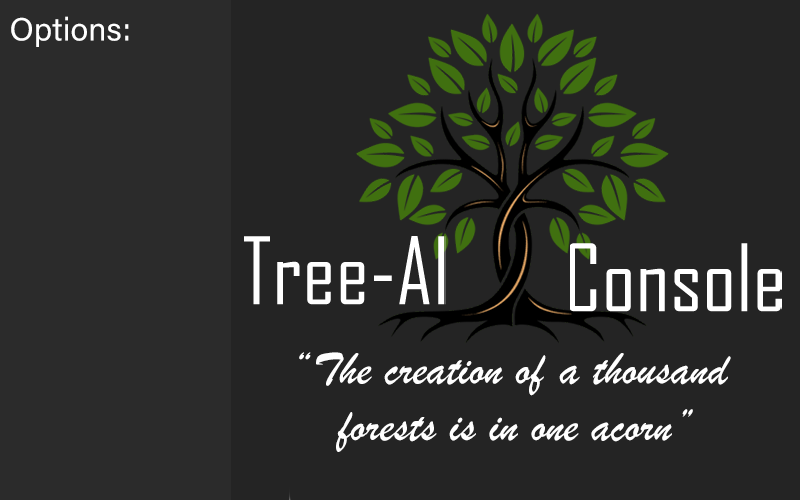
<style>
.page{position:relative;width:800px;height:500px;background:#242424}
.page>*{position:absolute;margin:0}
.t1{font:32.2px "AcuminConcept-Regular";letter-spacing:0.005em;color:#ffffff}
.t2{font:47.4px "BrushScriptMT";letter-spacing:0.005em;color:#ffffff}
</style>
<div class="page">
<p class="t1" style="left:11px;top:16px;width:118px;height:31px">Options:</p>
<p class="t2" style="left:299px;top:352px;width:432px;height:100px;text-align:center">“The creation of a thousand<br> forests is in one acorn”</p>
</div>
